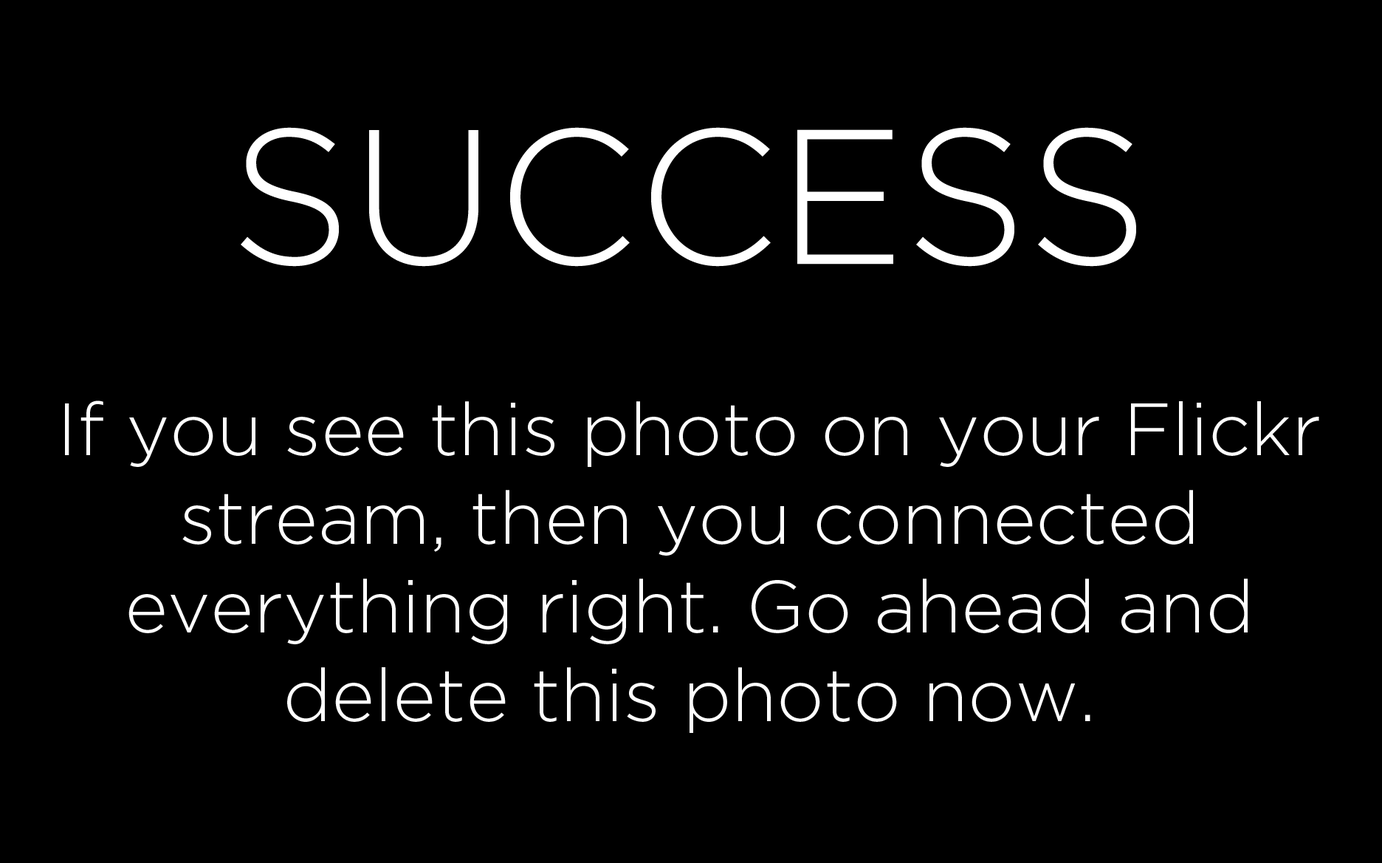
<style>
.page{position:relative;width:1382px;height:863px;background:#000000}
.page>*{position:absolute;margin:0}
.t1{font:190.5px "Gotham-Light";color:#ffffff}
.t2{font:73.8px "Gotham-Light";color:#ffffff}
</style>
<div class="page">
<p class="t1" style="left:241px;top:127px;width:896px;height:140px">SUCCESS</p>
<p class="t2" style="left:65px;top:400px;width:1255px;height:333px;text-align:center">If you see this photo on your Flickr stream, then you connected <br>everything right. Go ahead and <br>delete this photo now.</p>
</div>
